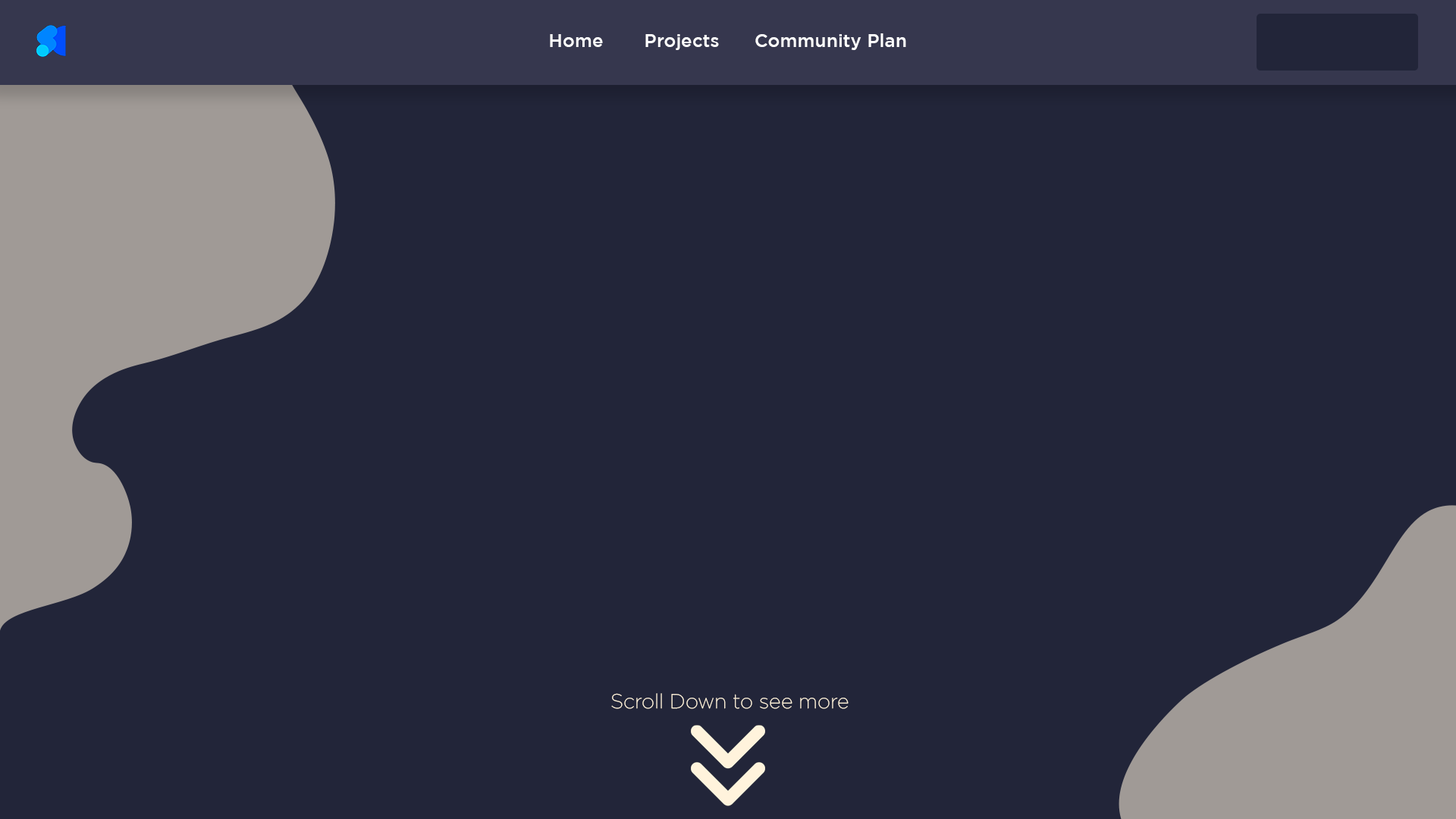
<style>
.page{position:relative;width:1456px;height:819px;background:#222539}
.page>*{position:absolute;margin:0}
.t1{font:31.5px "Gotham-Medium";color:#ffffff}
.t2{font:34.8px "Gotham-XLight";color:#fff3dc}
</style>
<div class="page">
<p class="t1" style="left:550px;top:34px;width:53px;height:13px">Home</p>
<p class="t1" style="left:645px;top:34px;width:74px;height:16px">Projects</p>
<p class="t1" style="left:755px;top:33px;width:151px;height:17px">Community Plan</p>
<p class="t2" style="left:611px;top:693px;width:238px;height:16px">Scroll Down to see more</p>
</div>
